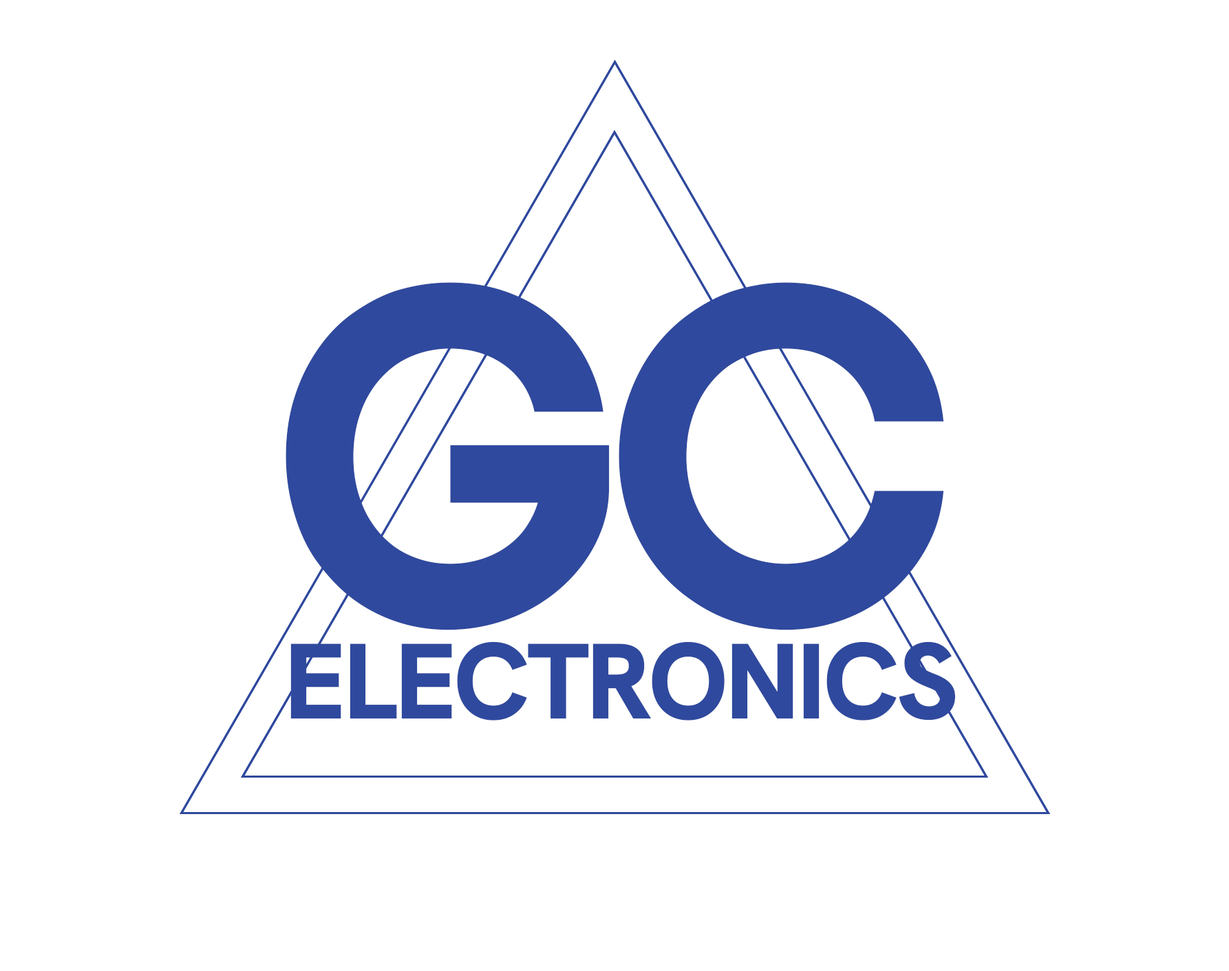
<style>
.page{position:relative;width:1229px;height:971px;background:#ffffff}
.page>*{position:absolute;margin:0}
.t1{font:286.6px "Boldonse-Regular";letter-spacing:-0.025em;color:#2f499e;font-variant:small-caps}
.t2{font:107.1px "HankenGrotesk-ExtraBold";letter-spacing:-0.025em;color:#2f499e;font-variant:small-caps}
</style>
<div class="page">
<p class="t1" style="left:285px;top:282px;width:659px;height:348px">GC</p>
<p class="t2" style="left:290px;top:641px;width:665px;height:79px">ELECTRONICS</p>
</div>
